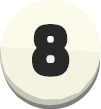
<style>
.page{position:relative;width:101px;height:109px;background:#fcfbeb}
.page>*{position:absolute;margin:0}
.t1{font:72px "MovaviGrotesqueBlack";color:#282828}
</style>
<div class="page">
<p class="t1" style="left:32px;top:24px;width:38px;height:53px">8</p>
</div>
